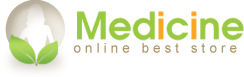
<style>
.page{position:relative;width:244px;height:77px;background:#ffffff}
.page>*{position:absolute;margin:0}
.t1{font:37.4px "AvantGarde-Demi";color:#99c841}
.t2{font:37.4px "AvantGarde-Demi";color:#fea526}
.t3{font:13.5px "ArialMT";letter-spacing:0.3em;color:#ab9569}
</style>
<div class="page">
<p class="t1" style="left:77px;top:11px;width:167px;height:30px">Med<span class="t2">i</span>c<span class="t2">i</span>ne</p>
<p class="t3" style="left:74px;top:43px;width:163px;height:10px">online best store</p>
</div>
